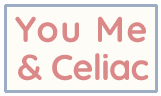
<style>
.page{position:relative;width:161px;height:96px;background:#fdfcf7}
.page>*{position:absolute;margin:0}
.t1{font:36px "Quicksand-Bold";letter-spacing:0.05em;color:#db8988}
.t2{font:36px "Quicksand-Bold";letter-spacing:-0.025em;color:#db8988}
</style>
<div class="page">
<p class="t1" style="left:15px;top:16px;width:131px;height:27px">You Me</p>
<p class="t2" style="left:18px;top:53px;width:131px;height:28px">&amp; Celiac</p>
</div>
